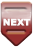
<style>
.page{position:relative;width:34px;height:48px}
.page>*{position:absolute;margin:0}
.t1{font:9px "Arial-Black";letter-spacing:-0.025em;color:#fdfcfc;font-weight:bold}
</style>
<div class="page">
<p class="t1" style="left:3px;top:18px;width:28px;height:8px">NEXT</p>
</div>
